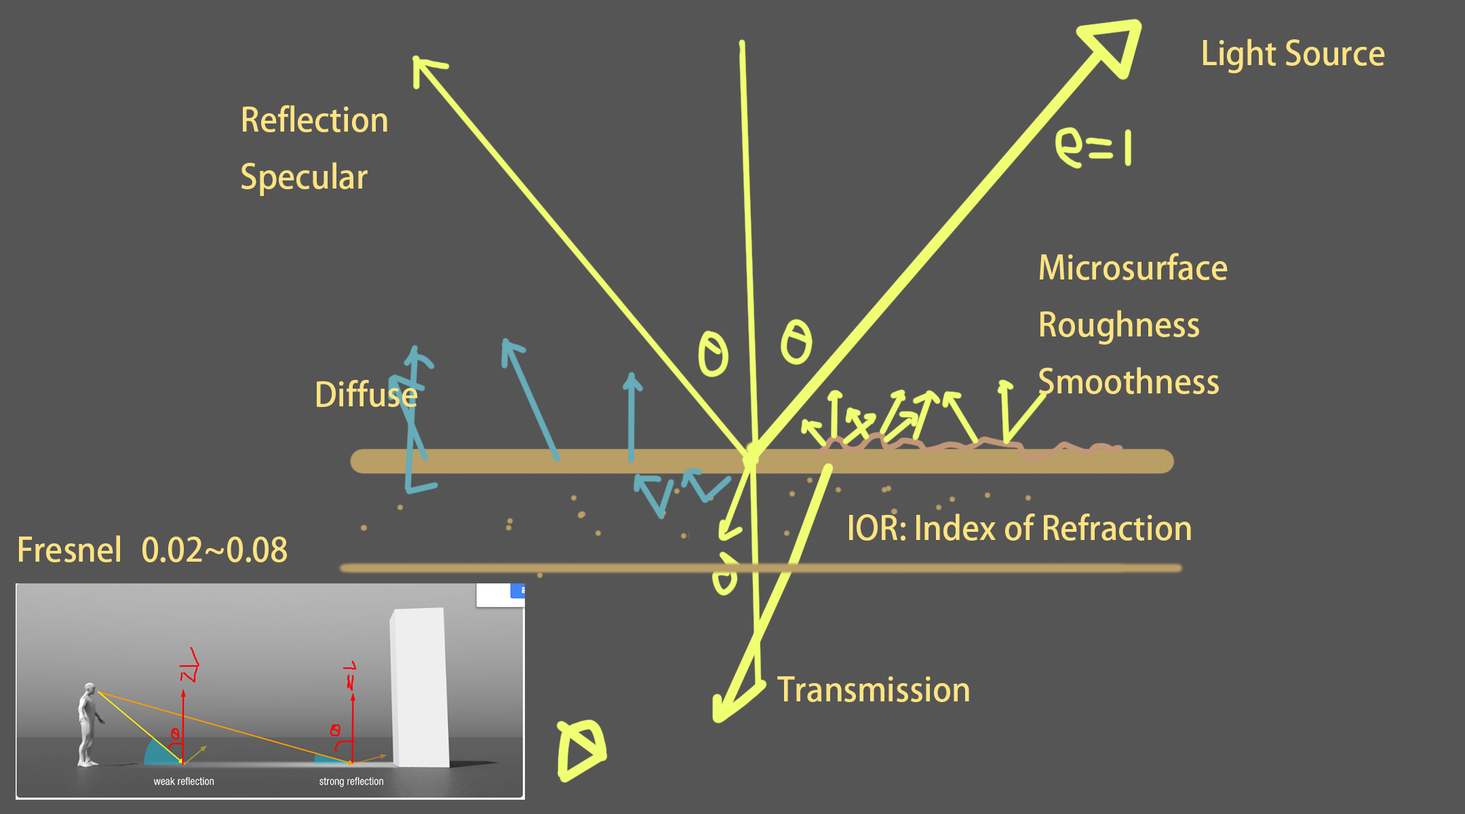
<style>
.page{position:relative;width:1465px;height:814px;background:#555555}
.page>*{position:absolute;margin:0}
.t1{font:32.6px "AdobeFanHeitiStd-Bold";color:#ffe382}
</style>
<div class="page">
<p class="t1" style="left:1203px;top:39px;width:182px;height:34px">Light Source</p>
<p class="t1" style="left:241px;top:105px;width:146px;height:91px">Reflection<br>Specular</p>
<p class="t1" style="left:1039px;top:253px;width:189px;height:141px">Microsurface<br>Roughness<br>Smoothness</p>
<p class="t1" style="left:317px;top:380px;width:101px;height:27px">Diffuse</p>
<p class="t1" style="left:849px;top:513px;width:342px;height:28px">IOR: Index of Refraction</p>
<p class="t1" style="left:19px;top:535px;width:101px;height:27px">Fresnel</p>
<p class="t1" style="left:142px;top:537px;width:145px;height:25px">0.02~0.08</p>
<p class="t1" style="left:777px;top:676px;width:192px;height:26px">Transmission</p>
</div>
